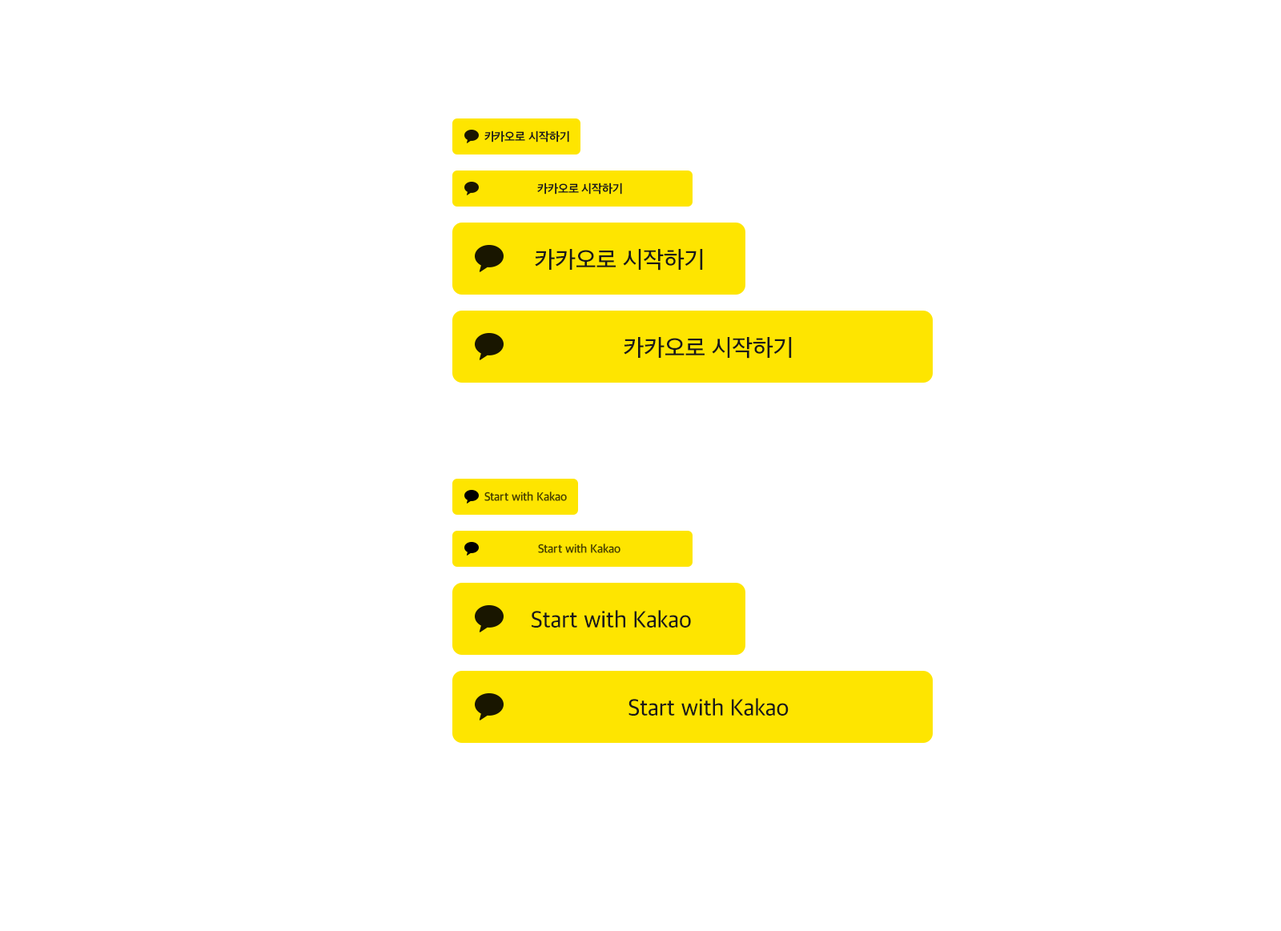
<style>
.page{position:relative;width:1281px;height:931px;background:#ffffff}
.page>*{position:absolute;margin:0}
.t1{font:12px "AppleSDGothicNeo-SemiBold";color:#191919}
.t2{font:24px "AppleSDGothicNeo-Medium";letter-spacing:-0.01em;color:#191919}
.t3{font:12px "AppleSDGothicNeo-SemiBold";letter-spacing:-0.01em;color:#473f00}
</style>
<div class="page">
<p class="t1" style="left:484px;top:130px;width:85px;height:12px">카카오로 시작하기</p>
<p class="t1" style="left:537px;top:183px;width:85px;height:12px">카카오로 시작하기</p>
<p class="t2" style="left:535px;top:249px;width:168px;height:22px">카카오로 시작하기</p>
<p class="t2" style="left:624px;top:337px;width:168px;height:22px">카카오로 시작하기</p>
<p class="t3" style="left:484px;top:492px;width:83px;height:9px">Start with Kakao</p>
<p class="t3" style="left:538px;top:544px;width:82px;height:9px">Start with Kakao</p>
<p class="t2" style="left:532px;top:610px;width:159px;height:18px">Start with Kakao</p>
<p class="t2" style="left:628px;top:698px;width:161px;height:18px">Start with Kakao</p>
</div>
